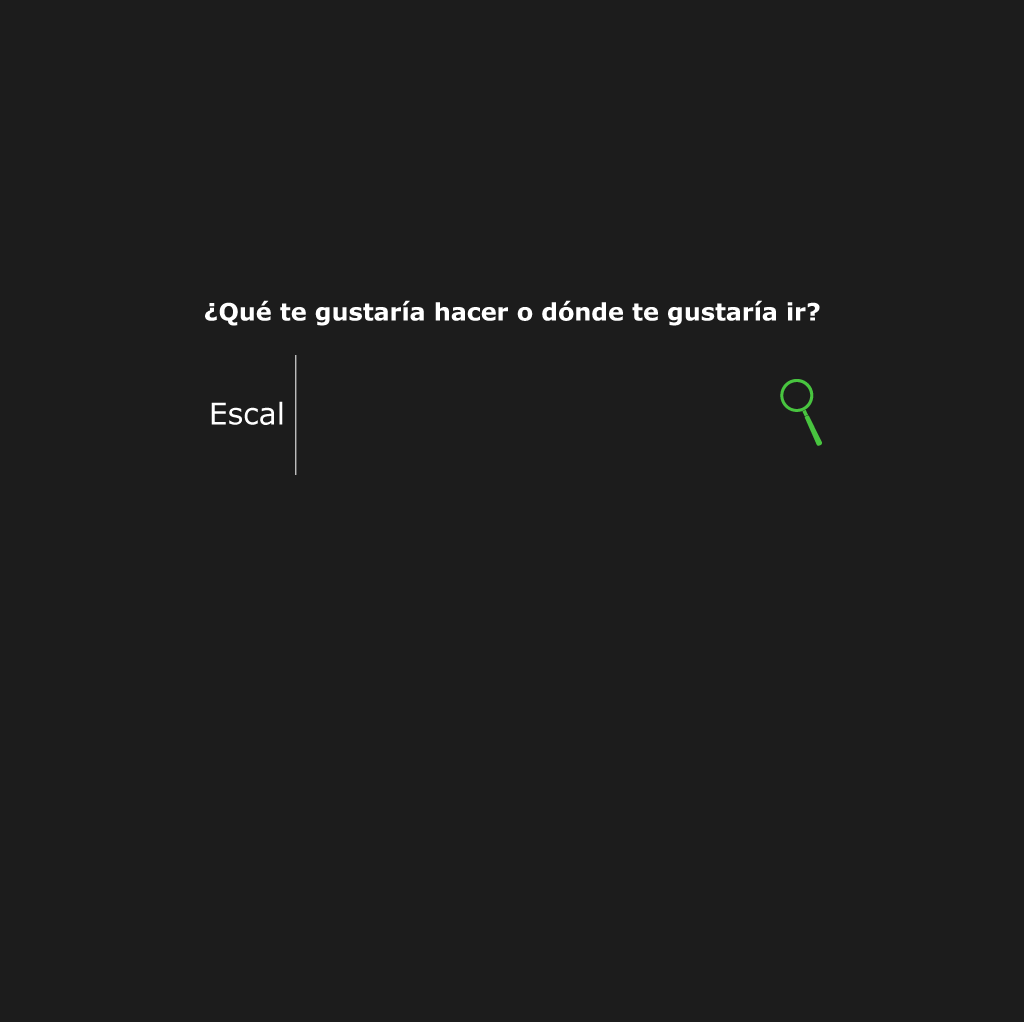
<style>
.page{position:relative;width:1024px;height:1022px;background:#1c1c1c}
.page>*{position:absolute;margin:0}
.t1{font:24px "Verdana-Bold";color:#ffffff}
.t2{font:30px "Verdana";color:#ffffff}
</style>
<div class="page">
<p class="t1" style="left:205px;top:300px;width:615px;height:26px">¿Qué te gustaría hacer o dónde te gustaría ir?</p>
<p class="t2" style="left:211px;top:401px;width:72px;height:24px">Escal</p>
</div>
